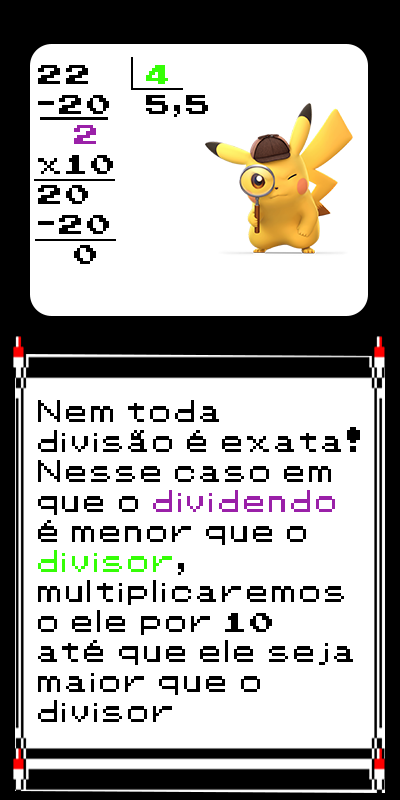
<style>
.page{position:relative;width:400px;height:800px;background:#ffffff}
.page>*{position:absolute;margin:0}
.t1{font:25px "Pokemon-Classic";color:#000000}
.t2{font:25px "Pokemon-Classic";color:#35fe06}
.t3{font:25px "Pokemon-Classic";color:#9a20a8}
</style>
<div class="page">
<p class="t1" style="left:38px;top:65px;width:170px;height:199px">22   <span class="t2">4<br></span>-20  5,5<br> <span class="t3">2 <br></span>x10<br>20<br>-20<br> 0</p>
<p class="t1" style="left:38px;top:400px;width:322px;height:322px">Nem toda<br>divisão é exata!<br>Nesse caso em <br>que o <span class="t3">dividendo <br></span>é menor que o <br><span class="t2">divisor</span>, <br>multiplicaremos <br>o ele por 10 <br>até que ele seja <br>maior que o <br>divisor</p>
</div>
